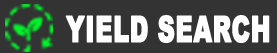
<style>
.page{position:relative;width:277px;height:53px;background:#333333}
.page>*{position:absolute;margin:0}
.t1{font:36.1px "Arial-Black";color:#ffffff;font-weight:bold;scale:0.66 1}
</style>
<div class="page">
<p class="t1" style="left:65px;top:15px;width:205px;height:28px">YIELD SEARCH</p>
</div>
